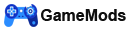
<style>
.page{position:relative;width:132px;height:30px;background:#ffffff}
.page>*{position:absolute;margin:0}
.t1{font:16px "Arial-BoldMT";color:#0f0f0f}
</style>
<div class="page">
<p class="t1" style="left:41px;top:9px;width:85px;height:12px">GameMods</p>
</div>
